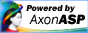
<style>
.page{position:relative;width:88px;height:33px;background:#ffffff}
.page>*{position:absolute;margin:0}
.t1{font:9px "FranklinGothic-HeavyItalic";color:#070707}
.t2{font:14px "FranklinGothic-BookItalic";color:#070707}
.t3{font:14px "FranklinGothic-HeavyItalic";color:#070707}
</style>
<div class="page">
<p class="t1" style="left:26px;top:5px;width:49px;height:8px">Powered by</p>
<p class="t2" style="left:29px;top:14px;width:56px;height:11px">Axon<span class="t3">ASP</span></p>
</div>
